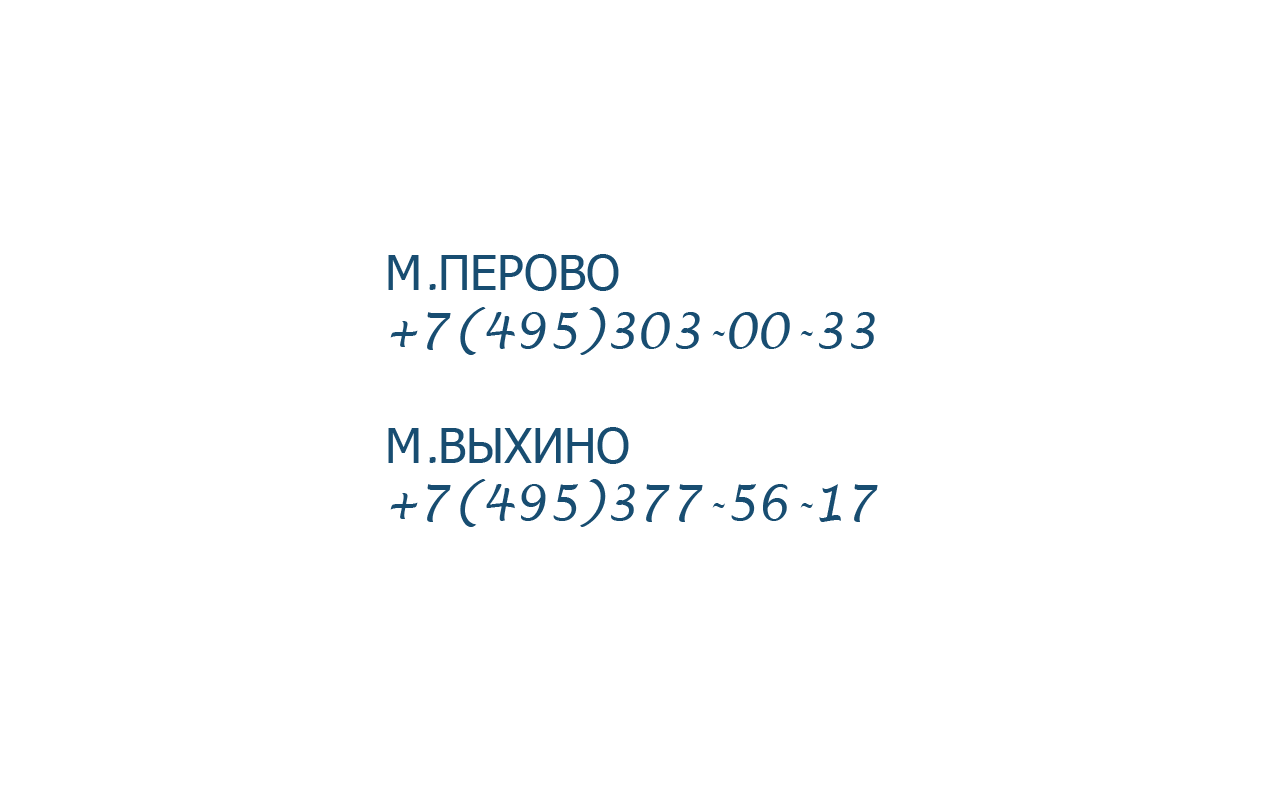
<style>
.page{position:relative;width:1280px;height:800px;background:#ffffff}
.page>*{position:absolute;margin:0}
.t1{font:48px "LucidaHandwriting-Italic";color:#184d71}
.t2{font:48px "Tahoma";color:#184d71}
</style>
<div class="page">
<p class="t1" style="left:388px;top:254px;width:490px;height:273px"><span class="t2">М</span>.<span class="t2">ПЕРОВО<br></span>+7(495)303-00-33<br><br><span class="t2">М</span>.<span class="t2">ВЫХИНО<br></span>+7(495)377-56-17</p>
</div>
